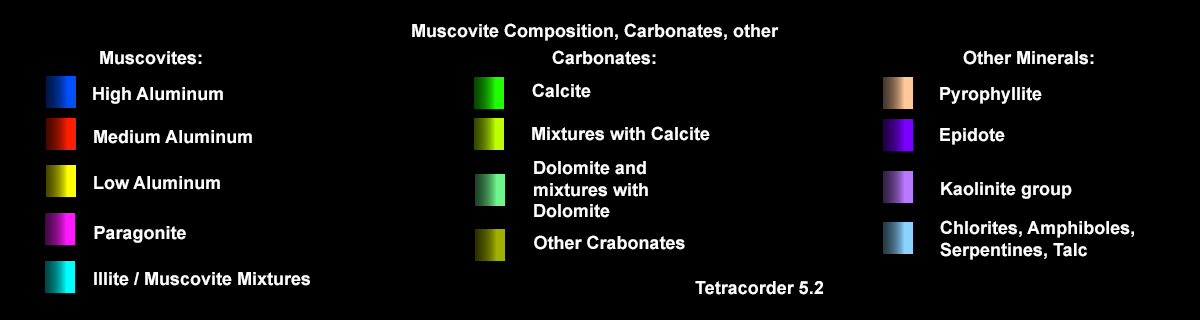
<style>
.page{position:relative;width:1200px;height:320px;background:#000000}
.page>*{position:absolute;margin:0}
.t1{font:18px "Arial-BoldMT";color:#fffefe}
.t2{font:18px "Arial-BoldMT";color:#ffffff}
</style>
<div class="page">
<p class="t1" style="left:412px;top:23px;width:367px;height:18px">Muscovite Composition, Carbonates, other</p>
<p class="t1" style="left:100px;top:51px;width:102px;height:14px">Muscovites:</p>
<p class="t1" style="left:552px;top:50px;width:104px;height:15px">Carbonates:</p>
<p class="t1" style="left:963px;top:50px;width:131px;height:15px">Other Minerals:</p>
<p class="t1" style="left:93px;top:87px;width:130px;height:17px">High Aluminum</p>
<p class="t1" style="left:532px;top:83px;width:59px;height:15px">Calcite</p>
<p class="t1" style="left:940px;top:87px;width:102px;height:17px">Pyrophyllite</p>
<p class="t1" style="left:532px;top:126px;width:178px;height:15px">Mixtures with Calcite</p>
<p class="t1" style="left:94px;top:130px;width:158px;height:14px">Medium Aluminum</p>
<p class="t1" style="left:940px;top:128px;width:65px;height:17px">Epidote</p>
<p class="t1" style="left:534px;top:161px;width:114px;height:57px">Dolomite and<br>mixtures with<br>Dolomite</p>
<p class="t1" style="left:94px;top:176px;width:126px;height:14px">Low Aluminum</p>
<p class="t1" style="left:941px;top:182px;width:131px;height:17px">Kaolinite group</p>
<p class="t1" style="left:940px;top:220px;width:194px;height:40px">Chlorites, Amphiboles,<br>Serpentines, Talc</p>
<p class="t1" style="left:94px;top:226px;width:92px;height:17px">Paragonite</p>
<p class="t2" style="left:534px;top:235px;width:151px;height:15px">Other Crabonates</p>
<p class="t1" style="left:94px;top:272px;width:216px;height:14px">Illite / Muscovite Mixtures</p>
<p class="t1" style="left:695px;top:281px;width:128px;height:14px">Tetracorder 5.2</p>
</div>
